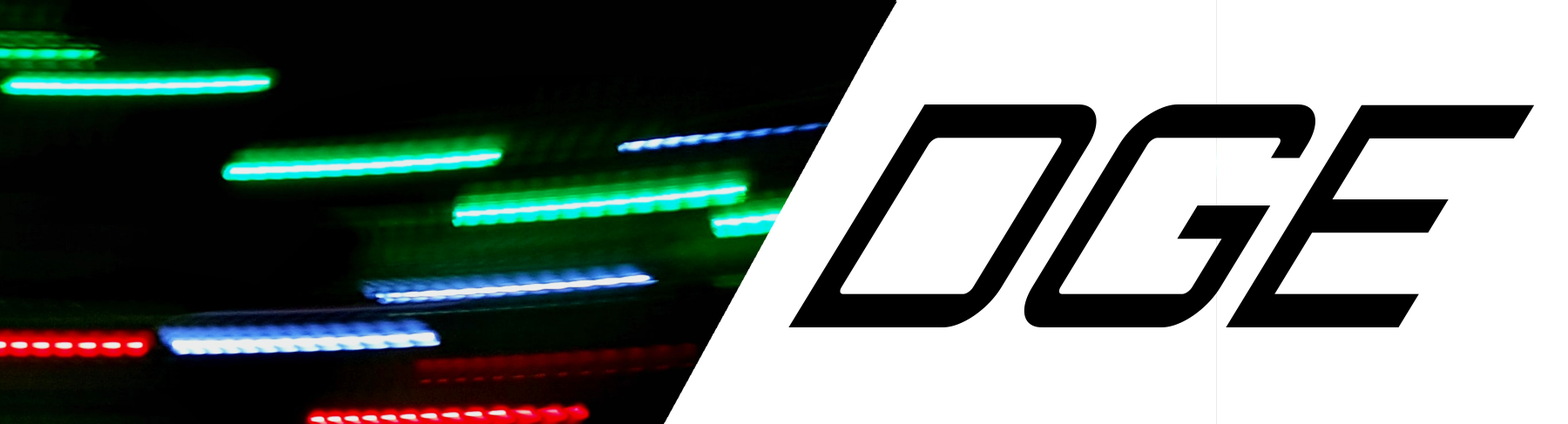
<style>
.page{position:relative;width:1568px;height:424px;background:#ffffff}
.page>*{position:absolute;margin:0}
.t1{font:362.2px "Orbitron-Medium";letter-spacing:0.005em;color:#000000;scale:0.72 1}
</style>
<div class="page">
<p class="t1" style="left:788px;top:104px;width:747px;height:224px">DGE</p>
</div>
